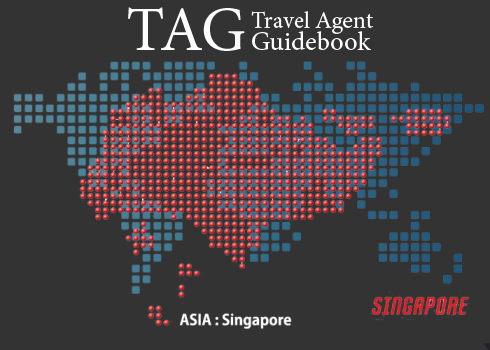
<style>
.page{position:relative;width:490px;height:350px;background:#333333}
.page>*{position:absolute;margin:0}
.t1{font:62.5px "MinionPro-Regular";color:#ffffff}
.t2{font:24px "MinionPro-Regular";color:#ffffff}
.t3{font:26.7px "MinionPro-Regular";color:#ffffff}
</style>
<div class="page">
<p class="t1" style="left:128px;top:7px;width:117px;height:44px">TAG</p>
<p class="t2" style="left:251px;top:11px;width:122px;height:23px">Travel Agent</p>
<p class="t3" style="left:252px;top:31px;width:119px;height:19px">Guidebook</p>
</div>
